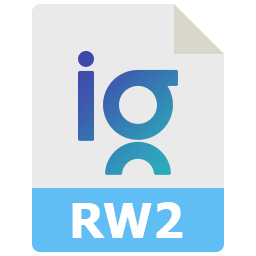
<style>
.page{position:relative;width:256px;height:256px;background:#eaeaea}
.page>*{position:absolute;margin:0}
.t1{font:48px "Tahoma-Bold";color:#ffffff}
</style>
<div class="page">
<p class="t1" style="left:72px;top:202px;width:111px;height:36px">RW2</p>
</div>
